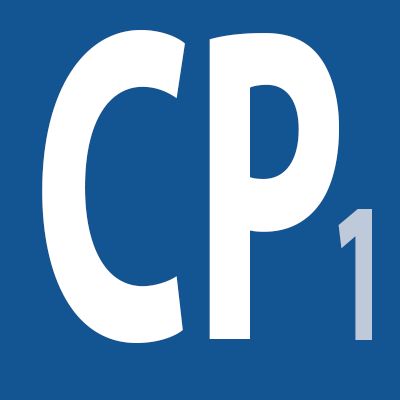
<style>
.page{position:relative;width:400px;height:400px;background:#135592}
.page>*{position:absolute;margin:0}
.t1{font:450.8px "MyriadPro-Bold";color:#ffffff;scale:0.59 1}
.t2{font:201.5px "MyriadPro-Bold";color:#bec9da;scale:0.55 1}
</style>
<div class="page">
<p class="t1" style="left:42px;top:30px;width:297px;height:313px">CP</p>
<p class="t2" style="left:338px;top:209px;width:34px;height:131px">1</p>
</div>
